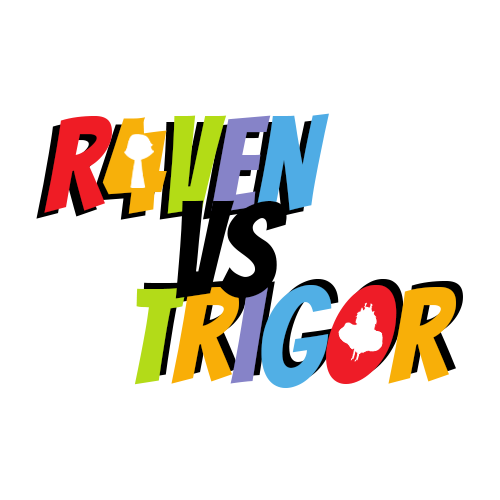
<style>
.page{position:relative;width:500px;height:500px;background:#ffffff}
.page>*{position:absolute;margin:0}
.t1{font:132.4px "Bangers-Regular";color:#000000}
.t2{font:132.4px "Bangers-Regular";color:#b3db18}
.t3{font:132.4px "Bangers-Regular";color:#f9ae07}
.t4{font:132.4px "Bangers-Regular";color:#8683c8}
.t5{font:132.4px "Bangers-Regular";color:#51afe5}
.t6{font:132.4px "Bangers-Regular";color:#ee1c27}
.t7{font:132.4px "Bangers-Regular";color:#f8af08}
</style>
<div class="page">
<p class="t1" style="left:175px;top:200px;width:112px;height:99px">VS</p>
<p class="t2" style="left:134px;top:285px;width:322px;height:103px">t<span class="t3">r</span><span class="t4">i</span><span class="t5">g</span><span class="t6">o</span><span class="t7">r</span></p>
</div>
